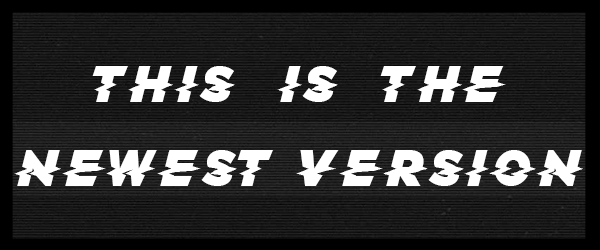
<style>
.page{position:relative;width:600px;height:250px}
.page>*{position:absolute;margin:0}
.t1{font:70px "PhelixBoomgartner-Regular";color:#ffffff}
</style>
<div class="page">
<p class="t1" style="left:14px;top:66px;width:569px;height:120px;text-align:center">THIS IS THE<br>NEWEST VERSION</p>
</div>
